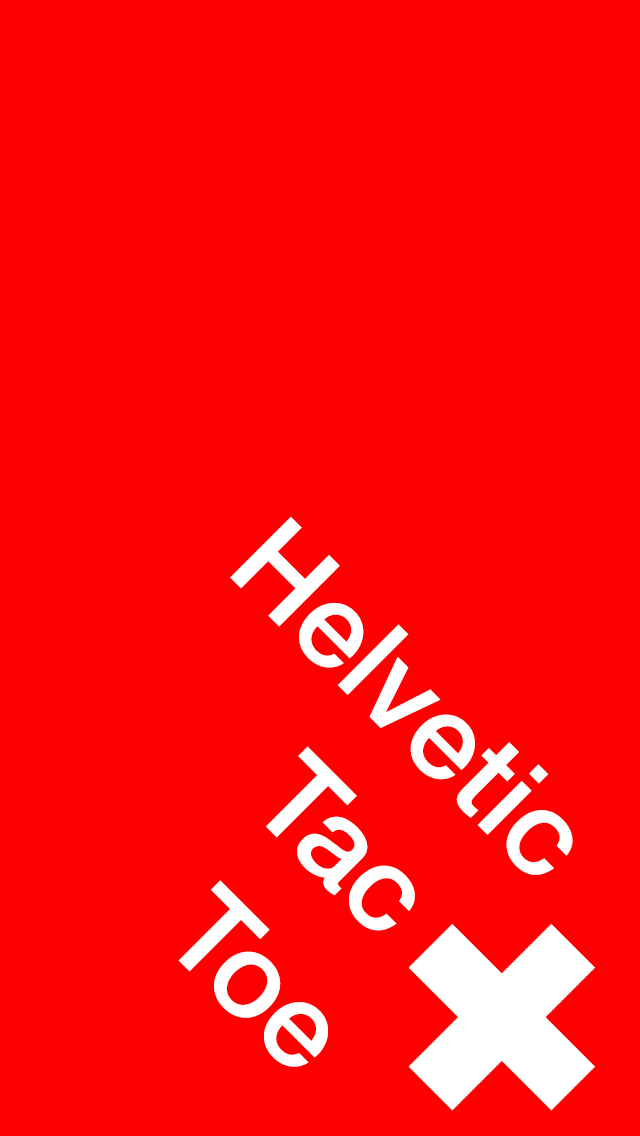
<style>
.page{position:relative;width:640px;height:1136px;background:#fe0000}
.page>*{position:absolute;margin:0}
.t1{font:120px "HelveticaNeue-Medium";color:#ffffff}
</style>
<div class="page">
<p class="t1" style="left:230px;top:516px;width:343px;height:359px;rotate:45deg">Helvetic</p>
<p class="t1" style="left:266px;top:746px;width:149px;height:185px;rotate:45deg">Tac</p>
<p class="t1" style="left:178px;top:880px;width:150px;height:187px;rotate:45deg">Toe</p>
</div>
